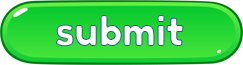
<style>
.page{position:relative;width:243px;height:65px}
.page>*{position:absolute;margin:0}
.t1{font:40px "FredokaOne-Regular";color:#ffffff}
</style>
<div class="page">
<p class="t1" style="left:56px;top:15px;width:128px;height:32px">submit</p>
</div>
